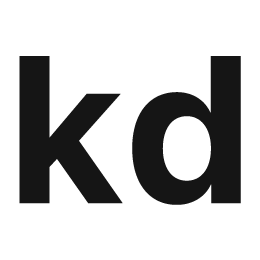
<style>
.page{position:relative;width:260px;height:260px;background:#ffffff}
.page>*{position:absolute;margin:0}
.t1{font:208.3px "SFProDisplay-Bold";letter-spacing:0.05em;color:#151515}
</style>
<div class="page">
<p class="t1" style="left:19px;top:56px;width:222px;height:149px">kd</p>
</div>
